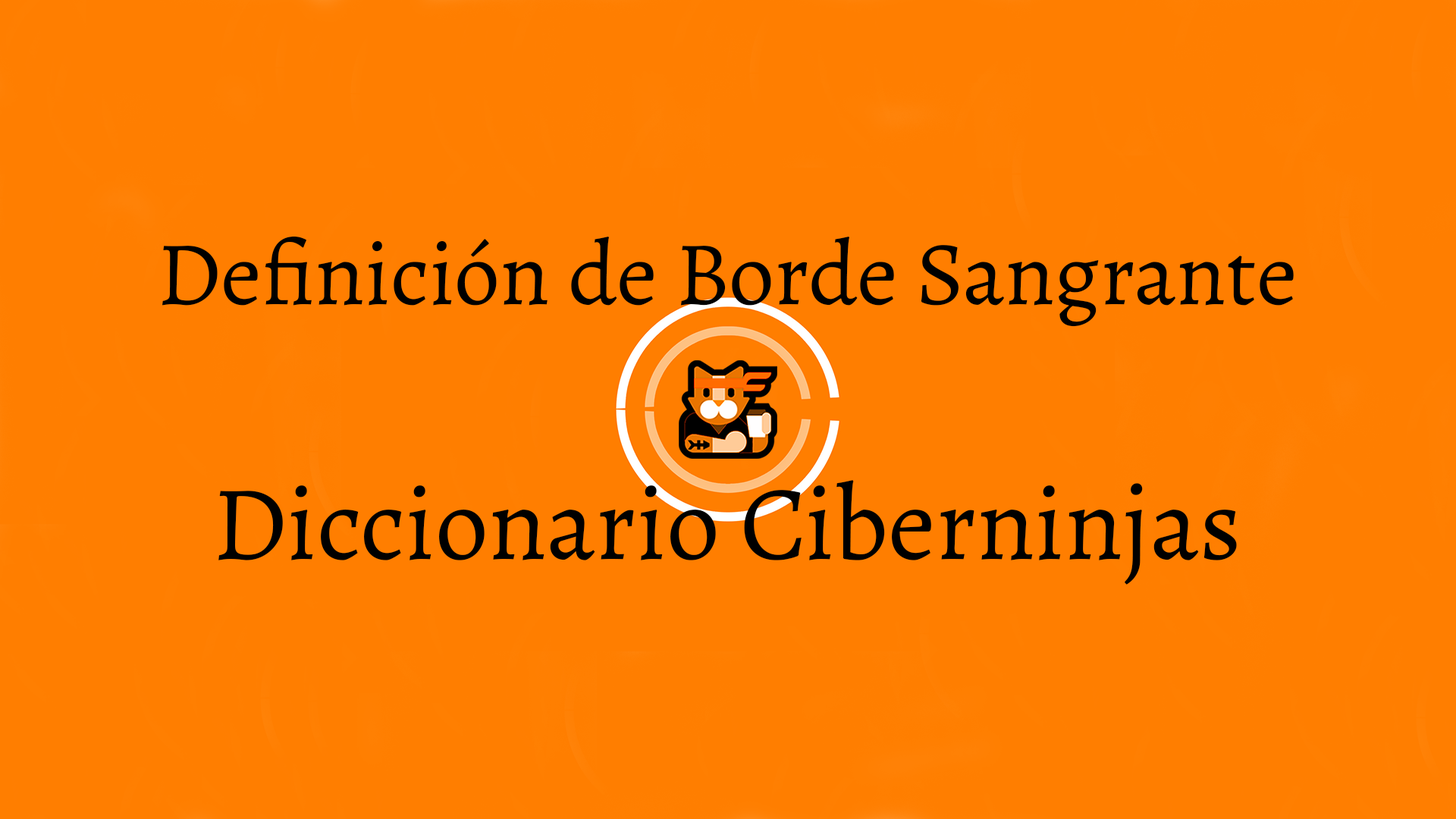
<style>
.page{position:relative;width:1456px;height:819px;background:#ff7e00}
.page>*{position:absolute;margin:0}
.t1{font:91px "Alegreya-Regular";color:#000000}
.t2{font:106.2px "Alegreya-Regular";color:#000000}
</style>
<div class="page">
<p class="t1" style="left:162px;top:236px;width:1132px;height:349px;text-align:center">Definición de Borde Sangrante<br><span class="t2"><br>Diccionario Ciberninjas</span></p>
</div>
